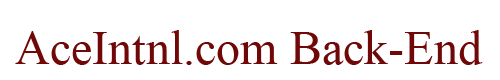
<style>
.page{position:relative;width:500px;height:80px;background:#ffffff}
.page>*{position:absolute;margin:0}
.t1{font:48px "TimesNewRomanPSMT";color:#710808}
</style>
<div class="page">
<p class="t1" style="left:15px;top:30px;width:468px;height:35px">AceIntnl.com Back-End</p>
</div>
